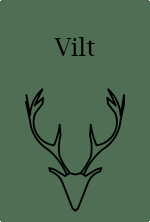
<style>
.page{position:relative;width:150px;height:222px;background:#4f6e54}
.page>*{position:absolute;margin:0}
.t1{font:24px "LucidaBright";color:#000000}
.t2{font:36px "LucidaBright";color:#caa947}
</style>
<div class="page">
<p class="t1" style="left:54px;top:37px;width:41px;height:19px"><span class="t2"><br></span>Vilt</p>
</div>
